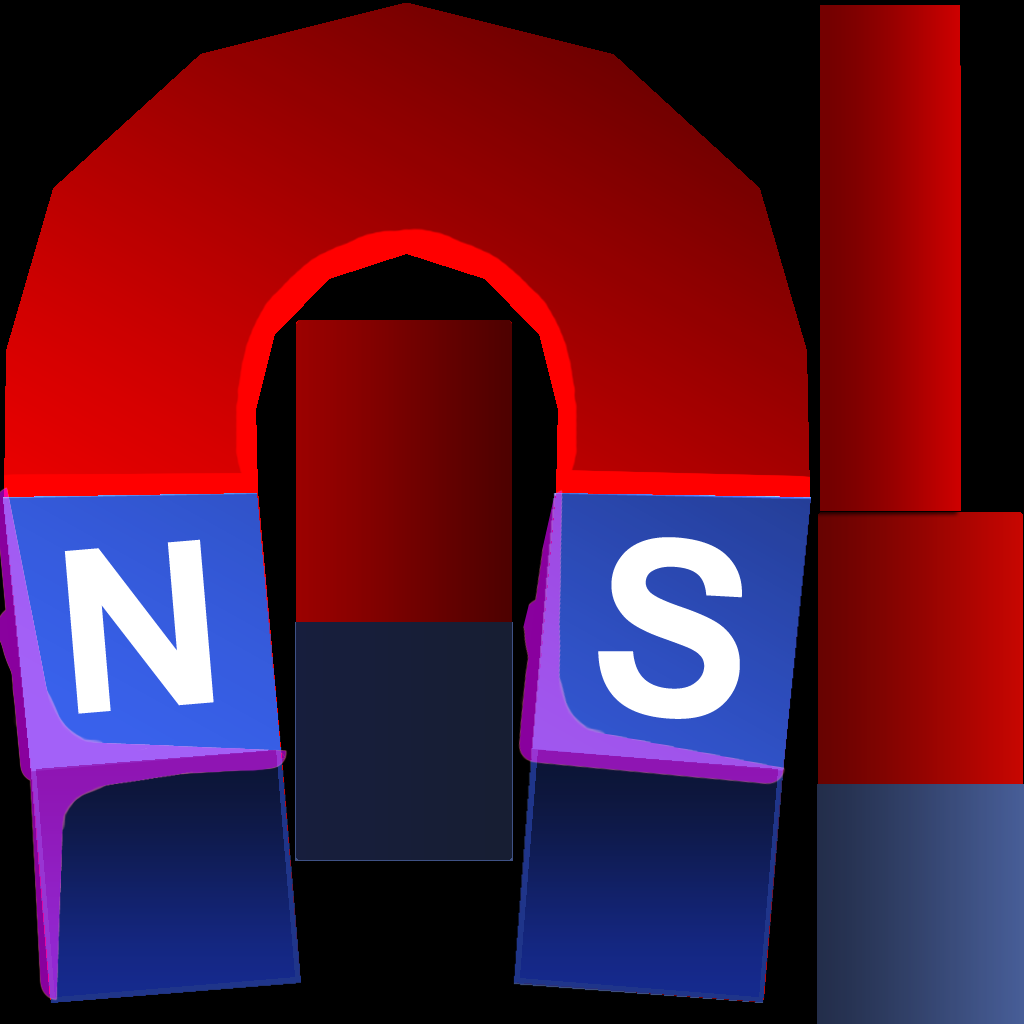
<style>
.page{position:relative;width:1024px;height:1024px;background:#000000}
.page>*{position:absolute;margin:0}
.t1{font:227.7px "Arial-BoldMT";color:#ffffff;text-transform:uppercase;scale:1.05 1}
.t2{font:244.3px "Arial-BoldMT";color:#ffffff;text-transform:uppercase}
</style>
<div class="page">
<p class="t1" style="left:64px;top:539px;width:150px;height:175px;rotate:-5deg">n</p>
<p class="t2" style="left:598px;top:537px;width:144px;height:182px;rotate:6deg">s</p>
</div>
